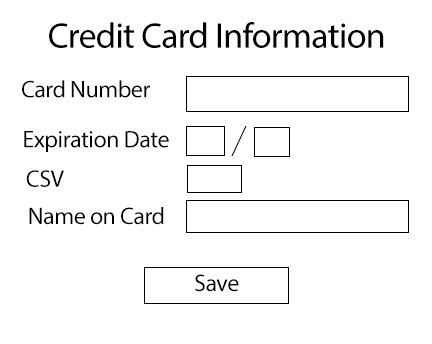
<style>
.page{position:relative;width:432px;height:344px;background:#ffffff}
.page>*{position:absolute;margin:0}
.t1{font:36px "MyriadPro-Regular";letter-spacing:-0.02em;color:#000000}
.t2{font:24px "MyriadPro-Regular";letter-spacing:-0.02em;color:#000000}
</style>
<div class="page">
<p class="t1" style="left:49px;top:22px;width:335px;height:26px">Credit Card Information</p>
<p class="t2" style="left:22px;top:80px;width:128px;height:18px">Card Number</p>
<p class="t2" style="left:24px;top:131px;width:145px;height:21px">Expiration Date</p>
<p class="t2" style="left:26px;top:170px;width:38px;height:17px">CSV</p>
<p class="t2" style="left:29px;top:207px;width:135px;height:18px">Name on Card</p>
<p class="t2" style="left:195px;top:274px;width:44px;height:18px">Save</p>
</div>
